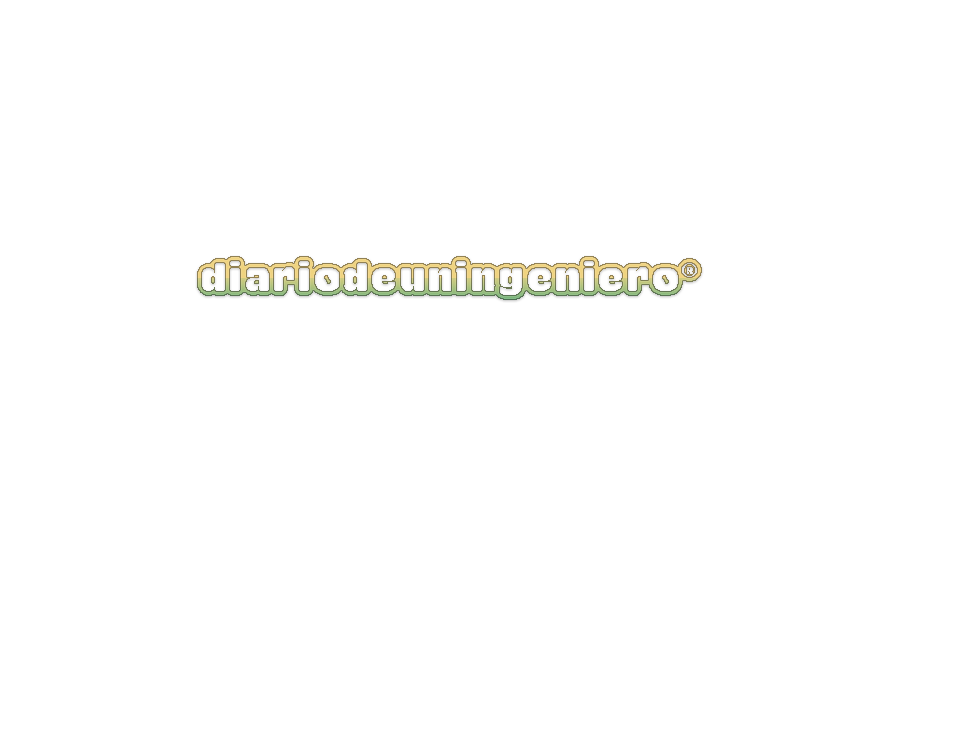
<style>
.page{position:relative;width:960px;height:756px;background:#ffffff}
.page>*{position:absolute;margin:0}
.t1{font:48px "Gaban"}
</style>
<div class="page">
<p class="t1" style="left:197px;top:256px;width:505px;height:44px">diariodeuningeniero®</p>
</div>
